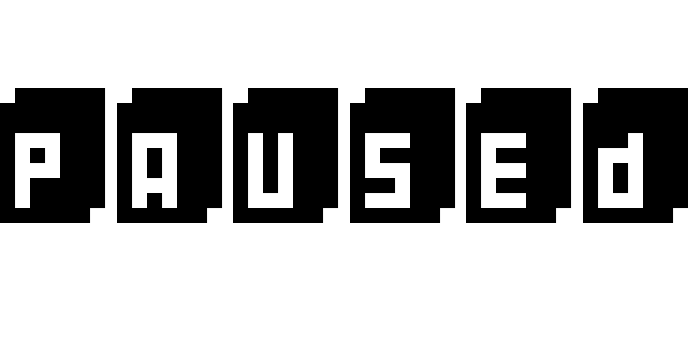
<style>
.page{position:relative;width:688px;height:344px;background:#ffffff}
.page>*{position:absolute;margin:0}
.t1{font:240px "Pixeliza20";color:#000000}
</style>
<div class="page">
<p class="t1" style="left:0px;top:88px;width:688px;height:135px">PAUSEd</p>
</div>
